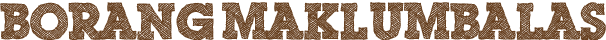
<style>
.page{position:relative;width:606px;height:40px;background:#ffffff}
.page>*{position:absolute;margin:0}
.t1{font:50px "ScribbleBoxDEMO";color:#684121}
</style>
<div class="page">
<p class="t1" style="left:0px;top:2px;width:606px;height:39px">Borang Maklumbalas</p>
</div>
